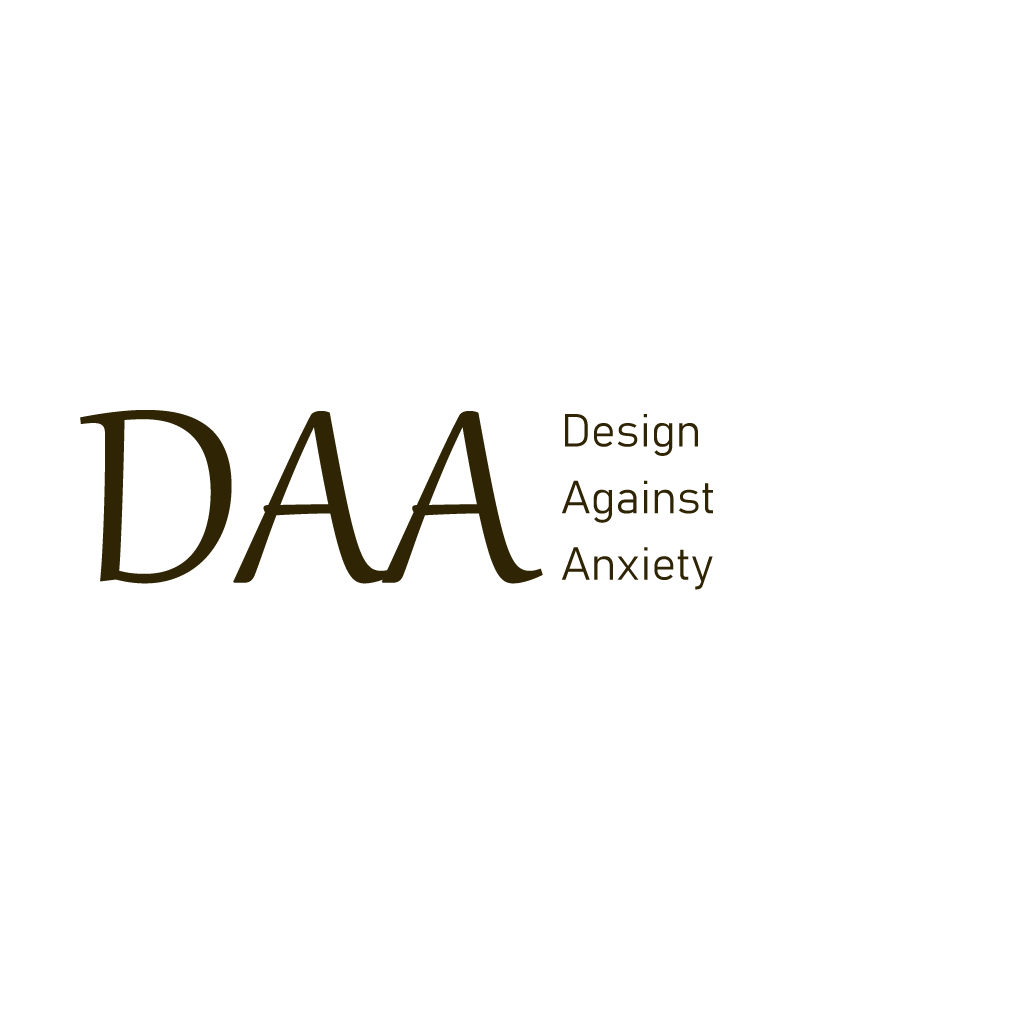
<style>
.page{position:relative;width:1024px;height:1024px;background:#ffffff}
.page>*{position:absolute;margin:0}
.t1{font:300px "Gabriola";color:#2f2504}
.t2{font:45.8px/66.7px "Bahnschrift-Light";color:#2f2504}
</style>
<div class="page">
<p class="t1" style="left:80px;top:410px;width:463px;height:174px">DAA</p>
<p class="t2" style="left:562px;top:414px;width:151px;height:176px">Design<br>Against<br>Anxiety</p>
</div>
